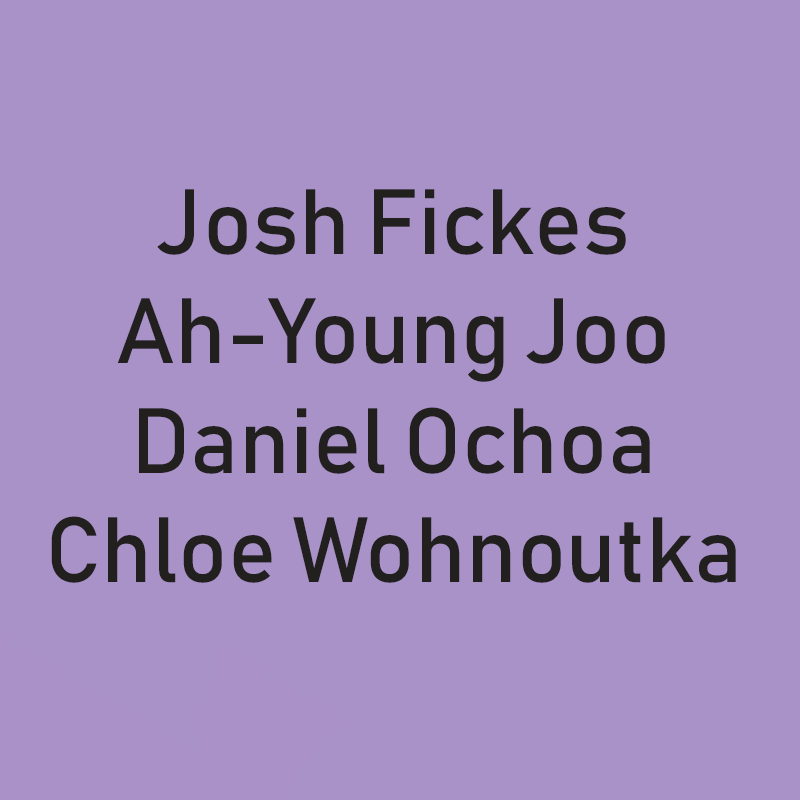
<style>
.page{position:relative;width:800px;height:800px;background:#a992c8}
.page>*{position:absolute;margin:0}
.t1{font:91.2px "Bahnschrift";color:#221f1f}
</style>
<div class="page">
<p class="t1" style="left:51px;top:189px;width:685px;height:394px;text-align:center">Josh Fickes<br>Ah-Young Joo<br>Daniel Ochoa<br>Chloe Wohnoutka</p>
</div>
